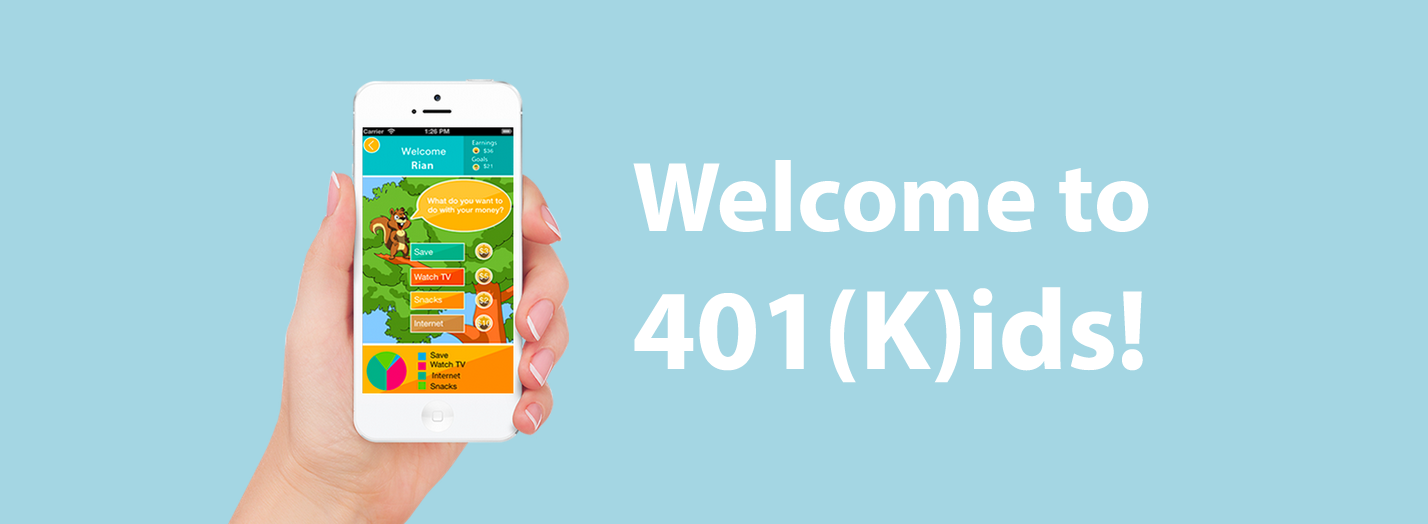
<style>
.page{position:relative;width:1428px;height:524px;background:#a4d6e3}
.page>*{position:absolute;margin:0}
.t1{font:100px "MyriadPro-Bold";color:#ffffff}
.t2{font:115px "MyriadPro-Bold";color:#ffffff}
</style>
<div class="page">
<p class="t1" style="left:633px;top:160px;width:516px;height:223px">Welcome to <br><span class="t2">401(K)ids!</span></p>
</div>
